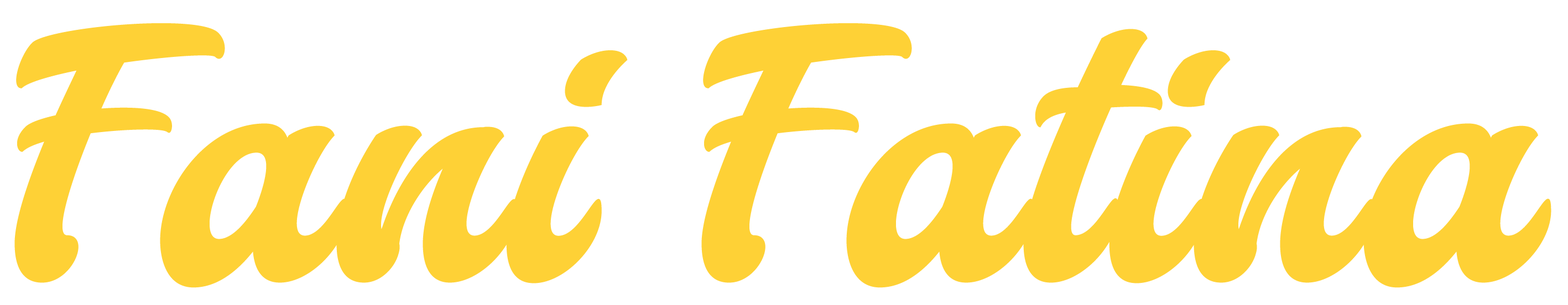
<style>
.page{position:relative;width:1568px;height:305px;background:#ffffff}
.page>*{position:absolute;margin:0}
.t1{font:372.1px "Aerillyo";letter-spacing:0.01em;color:#fed136;font-weight:bold}
</style>
<div class="page">
<p class="t1" style="left:14px;top:23px;width:1537px;height:265px">Fani Fatina</p>
</div>
